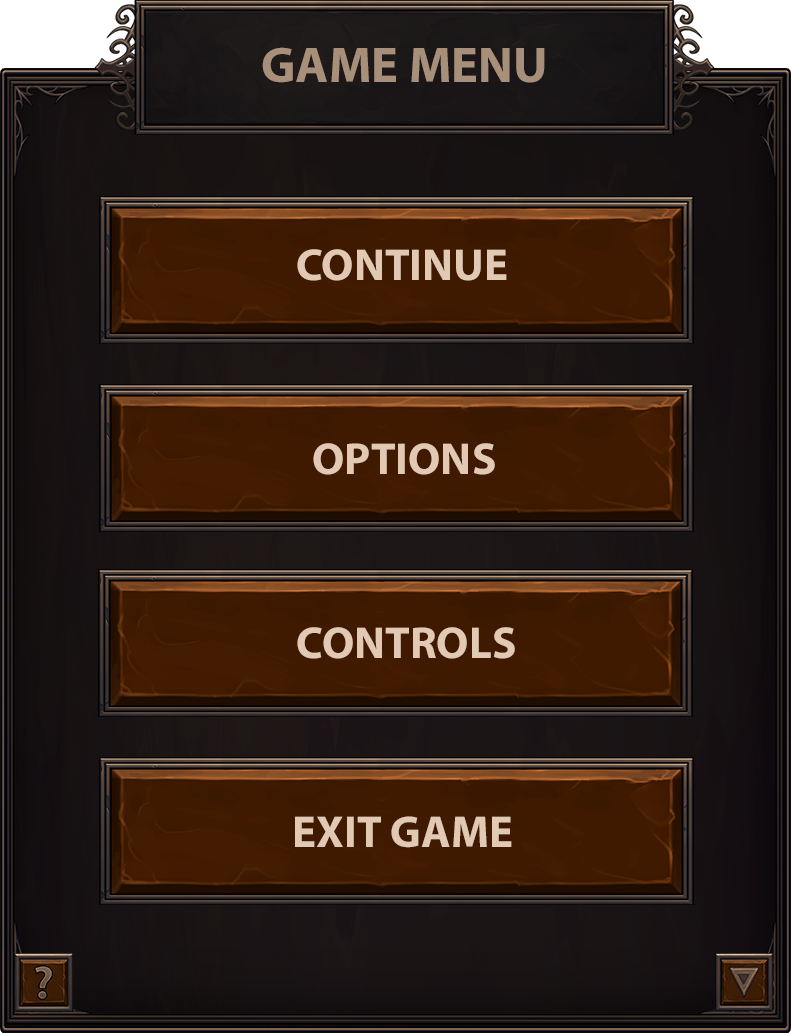
<style>
.page{position:relative;width:791px;height:1033px}
.page>*{position:absolute;margin:0}
.t1{font:50.5px "MyriadPro-Bold";color:#a78f79}
.t2{font:45px "MyriadPro-Bold";color:#e2c9b4}
</style>
<div class="page">
<p class="t1" style="left:262px;top:47px;width:283px;height:36px">GAME MENU</p>
<p class="t2" style="left:297px;top:249px;width:210px;height:32px">CONTINUE</p>
<p class="t2" style="left:313px;top:443px;width:182px;height:32px">OPTIONS</p>
<p class="t2" style="left:297px;top:627px;width:218px;height:32px">CONTROLS</p>
<p class="t2" style="left:295px;top:816px;width:217px;height:32px">EXIT GAME</p>
</div>
